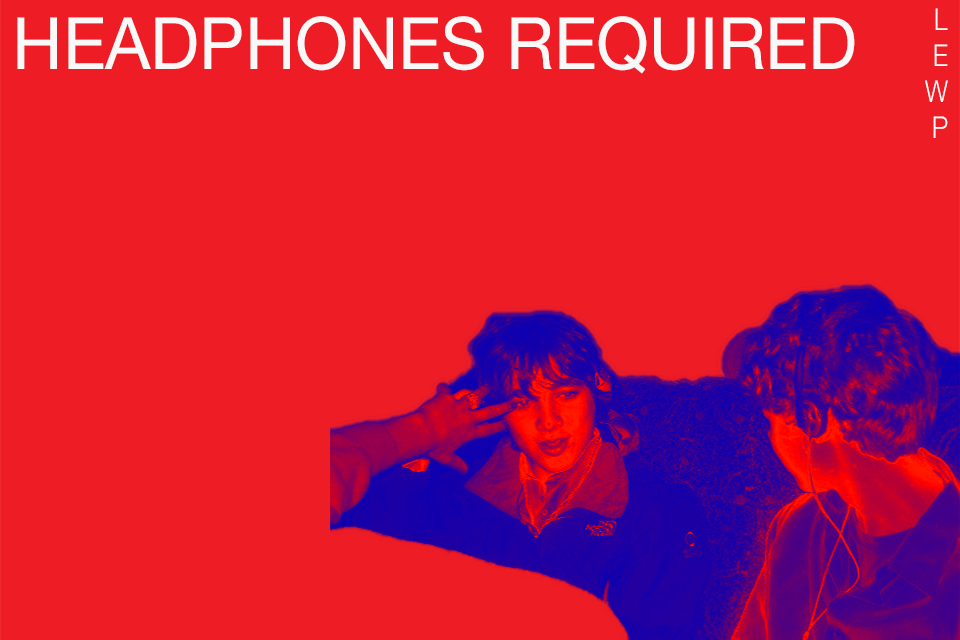
<style>
.page{position:relative;width:960px;height:640px;background:#ee1c24}
.page>*{position:absolute;margin:0}
.t1{font:72px "HelveticaNeue";color:#f8f8f8;scale:0.97 1}
.t2{font:30px "HelveticaNeue-Light";color:#ffffff;scale:0.85 1}
</style>
<div class="page">
<p class="t1" style="left:17px;top:16px;width:838px;height:58px">HEADPHONES REQUIRED</p>
<p class="t2" style="left:925px;top:8px;width:23px;height:130px;text-align:right">L<br>E<br>W<br>P</p>
</div>
